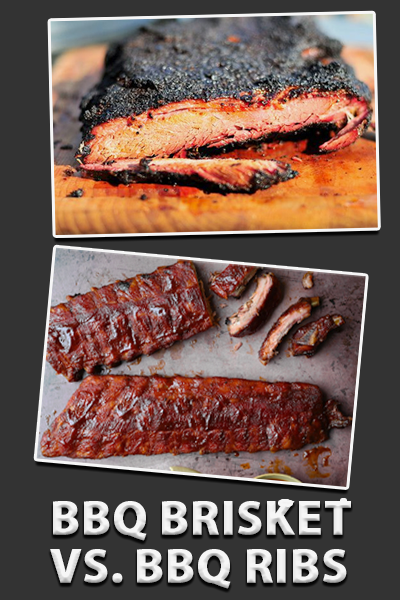
<style>
.page{position:relative;width:400px;height:600px;background:#333333}
.page>*{position:absolute;margin:0}
.t1{font:48px/48px "MyriadPro-Bold";letter-spacing:-0.005em;color:#ffffff;text-transform:uppercase;font-weight:bold}
</style>
<div class="page">
<p class="t1" style="left:50px;top:501px;width:301px;height:88px">BBQ Brisket <br>Vs. BBQ Ribs</p>
</div>
